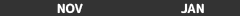
<style>
.page{position:relative;width:240px;height:16px;background:#333333}
.page>*{position:absolute;margin:0}
.t1{font:12.5px "RoundedMplus1c-ExtraBold";color:#ffffff}
</style>
<div class="page">
<p class="t1" style="left:57px;top:3px;width:26px;height:11px">NOV</p>
<p class="t1" style="left:181px;top:3px;width:23px;height:11px">JAN</p>
</div>
